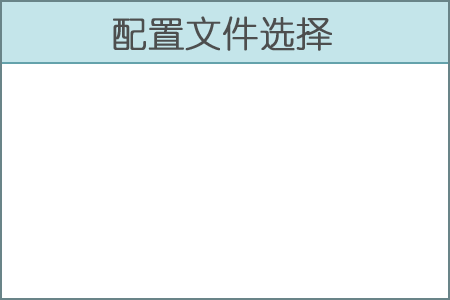
<style>
.page{position:relative;width:450px;height:300px;background:#ffffff}
.page>*{position:absolute;margin:0}
.t1{font:36px "YouYuan";color:#4d4e4e;font-weight:bold}
</style>
<div class="page">
<p class="t1" style="left:113px;top:16px;width:219px;height:35px">配置文件选择</p>
</div>
